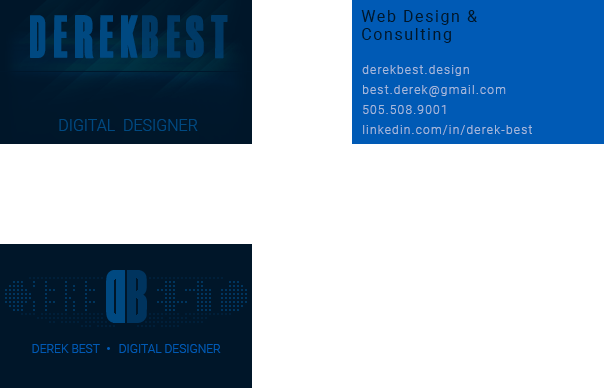
<style>
.page{position:relative;width:604px;height:388px;background:#ffffff}
.page>*{position:absolute;margin:0}
.t1{font:42px "FilmNoir";letter-spacing:0.1em;color:#004981}
.t2{font:42px "FilmNoir";letter-spacing:0.1em;color:#003a66}
.t3{font:16px/18px "Roboto-Regular";letter-spacing:0.1em;color:#00172a}
.t4{font:12px/20px "Roboto-Light";letter-spacing:0.1em;color:#a3b9dc}
.t5{font:16px "Roboto-Light";color:#004981}
.t6{font:12px "Roboto-Light";color:#005ab5}
</style>
<div class="page">
<p class="t1" style="left:30px;top:15px;width:108px;height:44px">Derek</p>
<p class="t2" style="left:142px;top:15px;width:86px;height:44px">Best</p>
<p class="t3" style="left:361px;top:10px;width:116px;height:33px">Web Design &amp;<br>Consulting</p>
<p class="t4" style="left:362px;top:65px;width:170px;height:70px">derekbest.design<br>best.derek@gmail.com<br>505.508.9001<br>linkedin.com/in/derek-best</p>
<p class="t5" style="left:59px;top:119px;width:139px;height:12px">DIGITAL  DESIGNER</p>
<p class="t6" style="left:32px;top:344px;width:68px;height:9px">DEREK BEST</p>
<p class="t6" style="left:119px;top:344px;width:102px;height:9px">DIGITAL DESIGNER</p>
</div>
